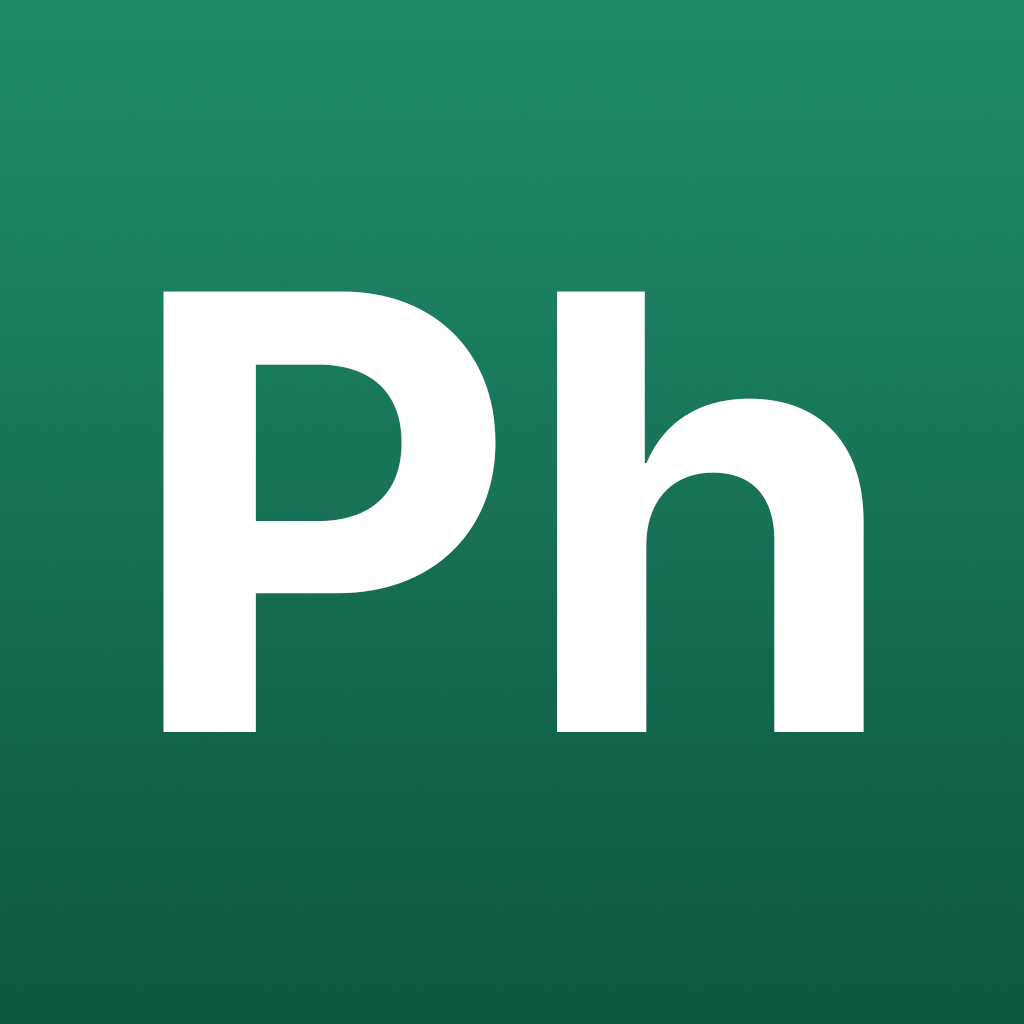
<style>
.page{position:relative;width:1024px;height:1024px}
.page>*{position:absolute;margin:0}
.t1{font:625px "SFProDisplay-Bold";letter-spacing:0.02em;color:#ffffff}
</style>
<div class="page">
<p class="t1" style="left:163px;top:291px;width:701px;height:441px">Ph</p>
</div>
